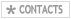
<style>
.page{position:relative;width:71px;height:19px;background:#ffffff}
.page>*{position:absolute;margin:0}
.t1{font:11px "TrebuchetMS";color:#999999;text-transform:uppercase;font-weight:bold;scale:0.8 1}
</style>
<div class="page">
<p class="t1" style="left:19px;top:5px;width:44px;height:9px">contacts</p>
</div>
